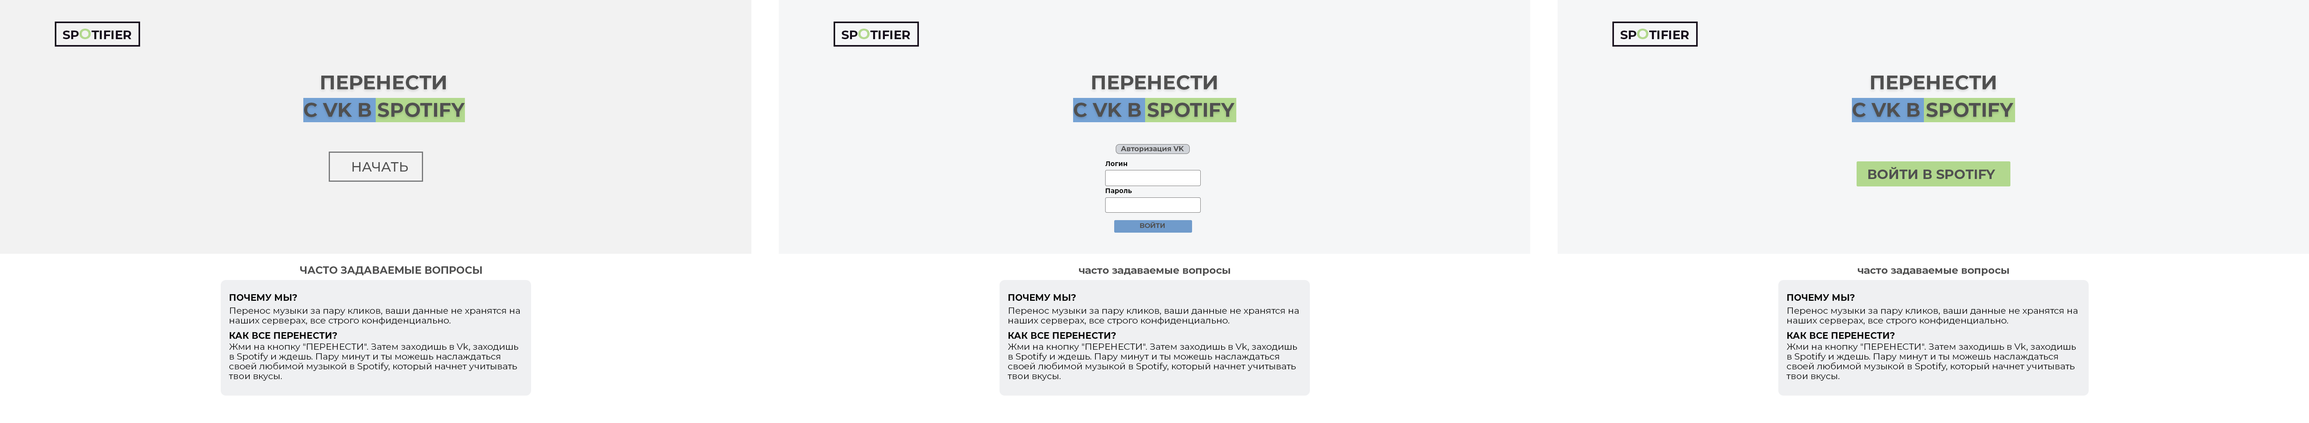
<style>
.page{position:relative;width:2309px;height:423px;background:#f5f6f7}
.page>*{position:absolute;margin:0}
.t1{font:12.1px "Montserrat-Bold";color:#170f1c}
.t2{font:14.5px "Montserrat-Bold";color:#b3d98f}
.t3{font:19.6px "Montserrat-Bold";color:#505050}
.t4{font:7px "Montserrat-Bold";color:#505050}
.t5{font:6.7px "Montserrat-Bold";color:#070808}
.t6{font:13.3px "Montserrat-Medium";color:#505050}
.t7{font:13.3px "Montserrat-Bold";color:#505050}
.t8{font:6.7px "Montserrat-Bold";color:#505050}
.t9{font:10.2px "Montserrat-Bold";color:#505050}
.t10{font:9px "Montserrat-Bold";color:#070808}
.t11{font:9px/9.8px "Montserrat-Regular";color:#070808}
</style>
<div class="page">
<p class="t1" style="left:63px;top:29px;width:68px;height:10px">SP<span class="t2">O</span>TIFIER</p>
<p class="t1" style="left:841px;top:29px;width:69px;height:10px">SP<span class="t2">O</span>TIFIER</p>
<p class="t1" style="left:1620px;top:29px;width:69px;height:10px">SP<span class="t2">O</span>TIFIER</p>
<p class="t3" style="left:321px;top:75px;width:125px;height:15px">ПЕРЕНЕСТИ</p>
<p class="t3" style="left:1092px;top:75px;width:125px;height:15px">ПЕРЕНЕСТИ</p>
<p class="t3" style="left:1871px;top:75px;width:124px;height:15px">ПЕРЕНЕСТИ</p>
<p class="t3" style="left:304px;top:103px;width:161px;height:14px">С VK В SPOTIFY</p>
<p class="t3" style="left:1074px;top:103px;width:161px;height:14px">С VK В SPOTIFY</p>
<p class="t3" style="left:1852px;top:103px;width:161px;height:14px">С VK В SPOTIFY</p>
<p class="t4" style="left:1121px;top:146px;width:63px;height:6px">Авторизация VK</p>
<p class="t5" style="left:1105px;top:161px;width:22px;height:5px">Логин</p>
<p class="t6" style="left:352px;top:162px;width:56px;height:9px">НАЧАТЬ</p>
<p class="t7" style="left:1868px;top:167px;width:127px;height:12px">ВОЙТИ В SPOTIFY</p>
<p class="t5" style="left:1105px;top:188px;width:27px;height:6px">Пароль</p>
<p class="t8" style="left:1140px;top:221px;width:25px;height:7px">ВОЙТИ</p>
<p class="t9" style="left:300px;top:266px;width:182px;height:9px">ЧАСТО ЗАДАВАЕМЫЕ ВОПРОСЫ</p>
<p class="t9" style="left:1079px;top:268px;width:151px;height:7px">часто задаваемые вопросы</p>
<p class="t9" style="left:1858px;top:268px;width:151px;height:7px">часто задаваемые вопросы</p>
<p class="t10" style="left:230px;top:294px;width:67px;height:7px">ПОЧЕМУ МЫ?</p>
<p class="t10" style="left:1008px;top:294px;width:68px;height:7px">ПОЧЕМУ МЫ?</p>
<p class="t10" style="left:1787px;top:294px;width:67px;height:7px">ПОЧЕМУ МЫ?</p>
<p class="t11" style="left:230px;top:307px;width:290px;height:18px">Перенос музыки за пару кликов, ваши данные не хранятся на <br>наших серверах, все строго конфиденциально.</p>
<p class="t11" style="left:1008px;top:307px;width:290px;height:18px">Перенос музыки за пару кликов, ваши данные не хранятся на <br>наших серверах, все строго конфиденциально.</p>
<p class="t11" style="left:1787px;top:307px;width:290px;height:18px">Перенос музыки за пару кликов, ваши данные не хранятся на <br>наших серверах, все строго конфиденциально.</p>
<p class="t10" style="left:230px;top:332px;width:107px;height:6px">КАК ВСЕ ПЕРЕНЕСТИ?</p>
<p class="t10" style="left:1008px;top:332px;width:108px;height:6px">КАК ВСЕ ПЕРЕНЕСТИ?</p>
<p class="t10" style="left:1787px;top:332px;width:107px;height:6px">КАК ВСЕ ПЕРЕНЕСТИ?</p>
<p class="t11" style="left:229px;top:343px;width:289px;height:37px">Жми на кнопку "ПЕРЕНЕСТИ". Затем заходишь в Vk, заходишь в Spotify и ждешь. Пару минут и ты можешь наслаждаться своей любимой музыкой в Spotify, который начнет учитывать твои вкусы.</p>
<p class="t11" style="left:1008px;top:343px;width:289px;height:37px">Жми на кнопку "ПЕРЕНЕСТИ". Затем заходишь в Vk, заходишь в Spotify и ждешь. Пару минут и ты можешь наслаждаться своей любимой музыкой в Spotify, который начнет учитывать твои вкусы.</p>
<p class="t11" style="left:1786px;top:343px;width:289px;height:37px">Жми на кнопку "ПЕРЕНЕСТИ". Затем заходишь в Vk, заходишь в Spotify и ждешь. Пару минут и ты можешь наслаждаться своей любимой музыкой в Spotify, который начнет учитывать твои вкусы.</p>
</div>
